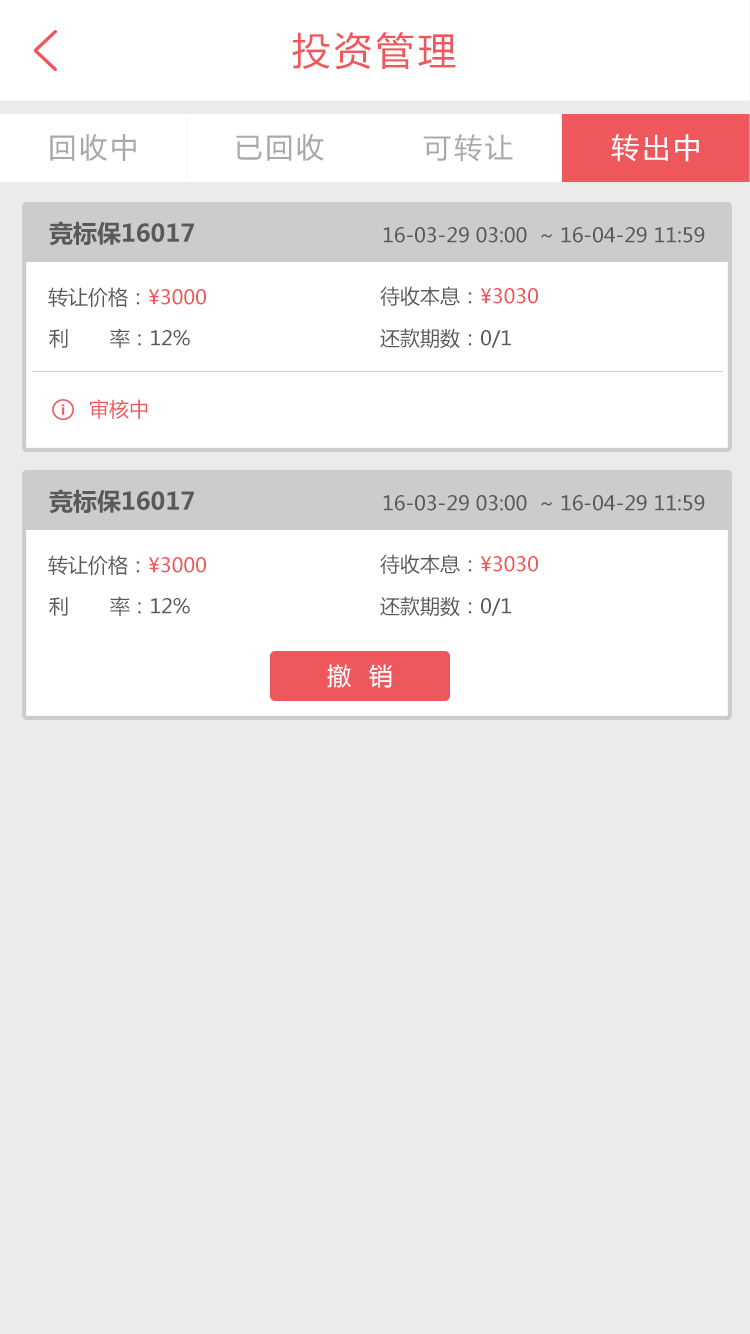
<style>
.page{position:relative;width:750px;height:1334px;background:#ebebeb}
.page>*{position:absolute;margin:0}
.t1{font:38px "MicrosoftYaHei";letter-spacing:0.1em;color:#ee575b}
.t2{font:28px "MicrosoftYaHei";letter-spacing:0.1em;color:#a7a9ac}
.t3{font:28px "MicrosoftYaHei";letter-spacing:0.1em;color:#fefefe}
.t4{font:24px "MicrosoftYaHei-Bold";color:#595959}
.t5{font:20px "MicrosoftYaHei";color:#595959}
.t6{font:20px "MicrosoftYaHei";color:#ee575b}
.t7{font:20px "MicrosoftYaHei";letter-spacing:-0.005em;color:#595959}
.t8{font:24px "MicrosoftYaHei";letter-spacing:0.05em;color:#ffffff}
</style>
<div class="page">
<p class="t1" style="left:292px;top:32px;width:164px;height:38px">投资管理</p>
<p class="t2" style="left:50px;top:134px;width:86px;height:27px">回收中</p>
<p class="t2" style="left:236px;top:134px;width:88px;height:27px">已回收</p>
<p class="t2" style="left:423px;top:134px;width:90px;height:28px">可转让</p>
<p class="t3" style="left:611px;top:134px;width:88px;height:28px">转出中</p>
<p class="t4" style="left:49px;top:221px;width:145px;height:25px">竞标保16017</p>
<p class="t5" style="left:383px;top:227px;width:322px;height:16px">16-03-29 03:00  ~ 16-04-29 11:59</p>
<p class="t5" style="left:48px;top:287px;width:158px;height:21px">转让价格：<span class="t6">¥3000</span></p>
<p class="t5" style="left:380px;top:286px;width:158px;height:20px">待收本息：<span class="t6">¥3030</span></p>
<p class="t7" style="left:49px;top:328px;width:141px;height:20px">利       率：12%</p>
<p class="t5" style="left:380px;top:328px;width:131px;height:21px">还款期数：0/1</p>
<p class="t6" style="left:90px;top:399px;width:58px;height:20px">审核中</p>
<p class="t4" style="left:49px;top:489px;width:145px;height:25px">竞标保16017</p>
<p class="t5" style="left:383px;top:495px;width:322px;height:16px">16-03-29 03:00  ~ 16-04-29 11:59</p>
<p class="t5" style="left:48px;top:555px;width:158px;height:21px">转让价格：<span class="t6">¥3000</span></p>
<p class="t5" style="left:380px;top:554px;width:158px;height:20px">待收本息：<span class="t6">¥3030</span></p>
<p class="t7" style="left:49px;top:596px;width:141px;height:20px">利       率：12%</p>
<p class="t5" style="left:380px;top:596px;width:131px;height:21px">还款期数：0/1</p>
<p class="t8" style="left:327px;top:664px;width:65px;height:24px">撤  销</p>
</div>
